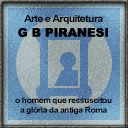
<style>
.page{position:relative;width:128px;height:128px}
.page>*{position:absolute;margin:0}
.t1{font:9.7px "Arial-BoldMT";letter-spacing:-0.06em;color:#000000;scale:1.1 1}
.t2{font:8px "Arial-BoldMT";letter-spacing:-0.06em;color:#000000;scale:1.1 1}
</style>
<div class="page">
<p class="t1" style="left:24px;top:15px;width:79px;height:9px">Arte e Arquitetura</p>
<p class="t2" style="left:15px;top:97px;width:97px;height:18px;text-align:center">o homem que ressuscitou<br>a glória da antiga Roma</p>
</div>
